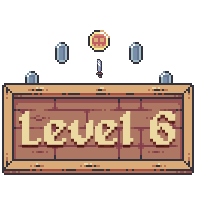
<style>
.page{position:relative;width:200px;height:200px;background:#ffffff}
.page>*{position:absolute;margin:0}
.t1{font:48px "Alagard";letter-spacing:-0.02em;color:#ebd9a1;font-weight:bold}
</style>
<div class="page">
<p class="t1" style="left:19px;top:111px;width:157px;height:34px">Level 6</p>
</div>
